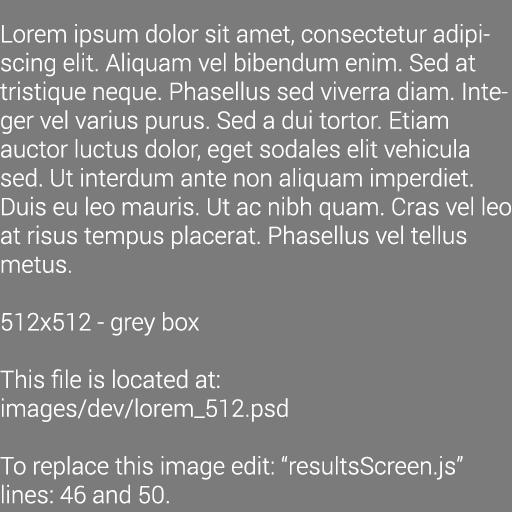
<style>
.page{position:relative;width:512px;height:512px;background:#7b7b7b}
.page>*{position:absolute;margin:0}
.t1{font:24px "Roboto-Light";color:#ffffff}
</style>
<div class="page">
<p class="t1" style="left:0px;top:24px;width:511px;height:480px">Lorem ipsum dolor sit amet, consectetur adipiscing elit. Aliquam vel bibendum enim. Sed at tristique neque. Phasellus sed viverra diam. Integer vel varius purus. Sed a dui tortor. Etiam auctor luctus dolor, eget sodales elit vehicula sed. Ut interdum ante non aliquam imperdiet. Duis eu leo mauris. Ut ac nibh quam. Cras vel leo at risus tempus placerat. Phasellus vel tellus metus.<br><br>512x512 - grey box<br><br>This file is located at:<br>images/dev/lorem_512.psd<br><br>To replace this image edit: “resultsScreen.js”<br>lines: 46 and 50.</p>
</div>
